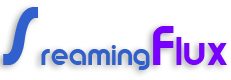
<style>
.page{position:relative;width:231px;height:80px;background:#ffffff}
.page>*{position:absolute;margin:0}
.t1{font:24px "Brandish";color:#2f60ce}
.t2{font:70px "Brandish";color:#2f60ce}
.t3{font:47px "Brandish";color:#7800ff}
.t4{font:34px "Brandish";color:#7800ff}
</style>
<div class="page">
<p class="t1" style="left:3px;top:7px;width:224px;height:63px"><span class="t2">S</span>reaming<span class="t3">F</span><span class="t4">lux</span></p>
</div>
